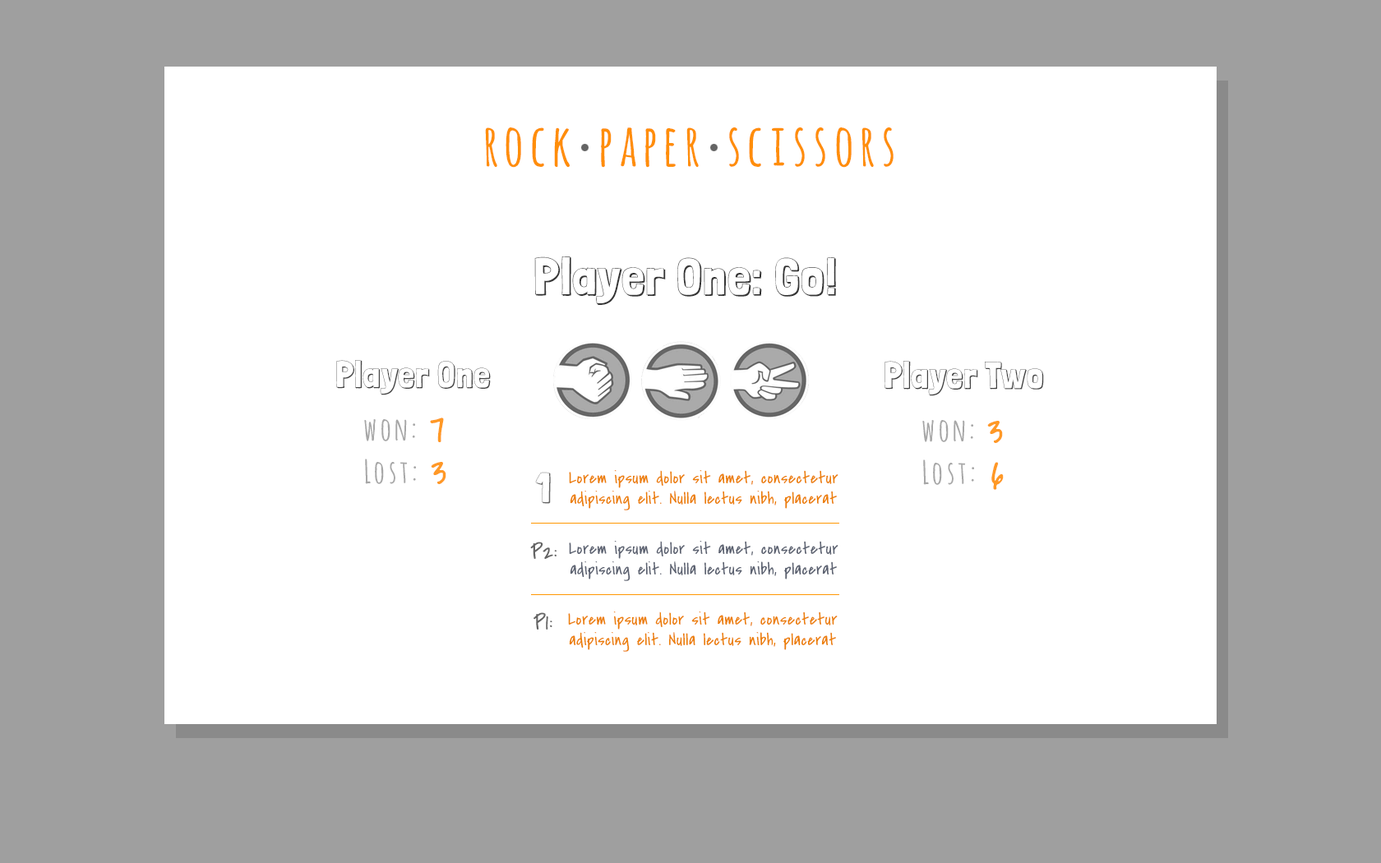
<style>
.page{position:relative;width:1381px;height:863px;background:#ffffff}
.page>*{position:absolute;margin:0}
.t1{font:57.3px "AmaticaSC-Bold";letter-spacing:0.025em;color:#ff8e09}
.t2{font:51.4px "LondrinaShadow-Regular";letter-spacing:0.025em;color:#353535}
.t3{font:36.7px "LondrinaShadow-Regular";letter-spacing:0.025em;color:#434343}
.t4{font:31.7px "AmaticaSC-Bold";letter-spacing:0.025em;color:#a7a7a7}
.t5{font:41.1px "CoveredByYourGrace";letter-spacing:0.025em;color:#ff9926}
.t6{font:41.1px "LondrinaShadow-Regular";letter-spacing:0.025em;color:#646464}
.t7{font:17.1px "CoveredByYourGrace";letter-spacing:0.025em;color:#ec8006}
.t8{font:23px "CoveredByYourGrace";letter-spacing:0.025em;color:#646464}
.t9{font:17.1px "CoveredByYourGrace";letter-spacing:0.025em;color:#5b6271}
</style>
<div class="page">
<p class="t1" style="left:485px;top:127px;width:409px;height:41px">rock paper scissors</p>
<p class="t2" style="left:534px;top:257px;width:302px;height:48px">Player One: Go!</p>
<p class="t3" style="left:336px;top:360px;width:155px;height:35px">Player One</p>
<p class="t3" style="left:885px;top:361px;width:159px;height:35px">Player Two</p>
<p class="t4" style="left:364px;top:419px;width:51px;height:23px">won:</p>
<p class="t5" style="left:430px;top:418px;width:14px;height:24px">7</p>
<p class="t4" style="left:922px;top:420px;width:51px;height:22px">won:</p>
<p class="t5" style="left:987px;top:421px;width:16px;height:22px">3</p>
<p class="t4" style="left:365px;top:459px;width:51px;height:25px">Lost:</p>
<p class="t4" style="left:923px;top:460px;width:51px;height:25px">Lost:</p>
<p class="t5" style="left:431px;top:462px;width:15px;height:22px">3</p>
<p class="t6" style="left:535px;top:472px;width:16px;height:32px">1</p>
<p class="t7" style="left:569px;top:470px;width:270px;height:41px;text-align:center">Lorem ipsum dolor sit amet, consectetur adipiscing elit. Nulla lectus nibh, placerat</p>
<p class="t5" style="left:992px;top:462px;width:12px;height:28px">6</p>
<p class="t8" style="left:530px;top:542px;width:27px;height:17px">P2:</p>
<p class="t9" style="left:569px;top:541px;width:270px;height:40px;text-align:center">Lorem ipsum dolor sit amet, consectetur adipiscing elit. Nulla lectus nibh, placerat</p>
<p class="t8" style="left:534px;top:613px;width:19px;height:17px">P1:</p>
<p class="t7" style="left:568px;top:612px;width:270px;height:40px;text-align:center">Lorem ipsum dolor sit amet, consectetur adipiscing elit. Nulla lectus nibh, placerat</p>
</div>
